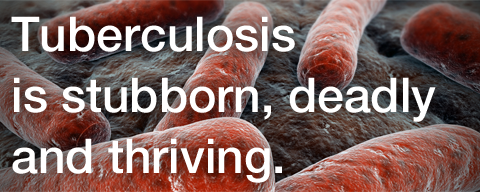
<style>
.page{position:relative;width:480px;height:192px}
.page>*{position:absolute;margin:0}
.t1{font:48px/61px "HelveticaNeue-Medium";color:#ffffff}
</style>
<div class="page">
<p class="t1" style="left:11px;top:16px;width:425px;height:167px">Tuberculosis<br>is stubborn, deadly<br>and thriving.</p>
</div>
